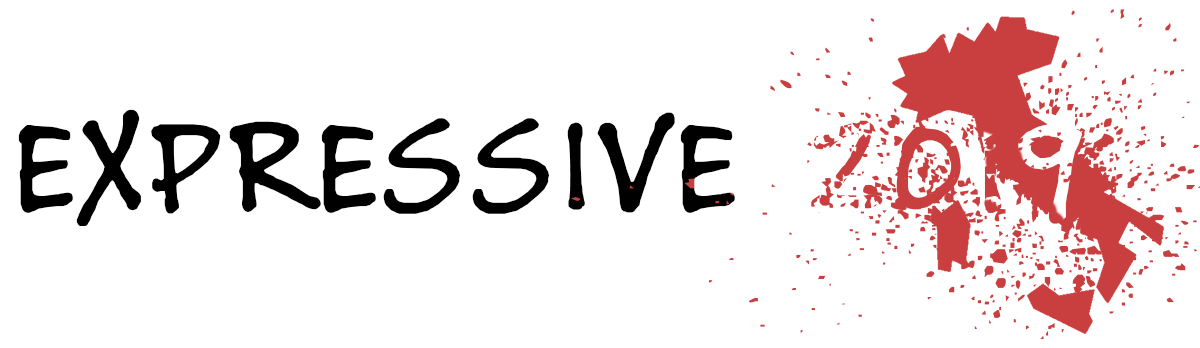
<style>
.page{position:relative;width:1200px;height:348px;background:#ffffff}
.page>*{position:absolute;margin:0}
.t1{font:144px "BuxtonSketch";letter-spacing:0.05em;color:#000000}
.t2{font:144px "BuxtonSketch";letter-spacing:0.05em;color:#ffffff}
</style>
<div class="page">
<p class="t1" style="left:18px;top:109px;width:1064px;height:117px">EXPRESSIVE  <span class="t2">2019</span></p>
</div>
